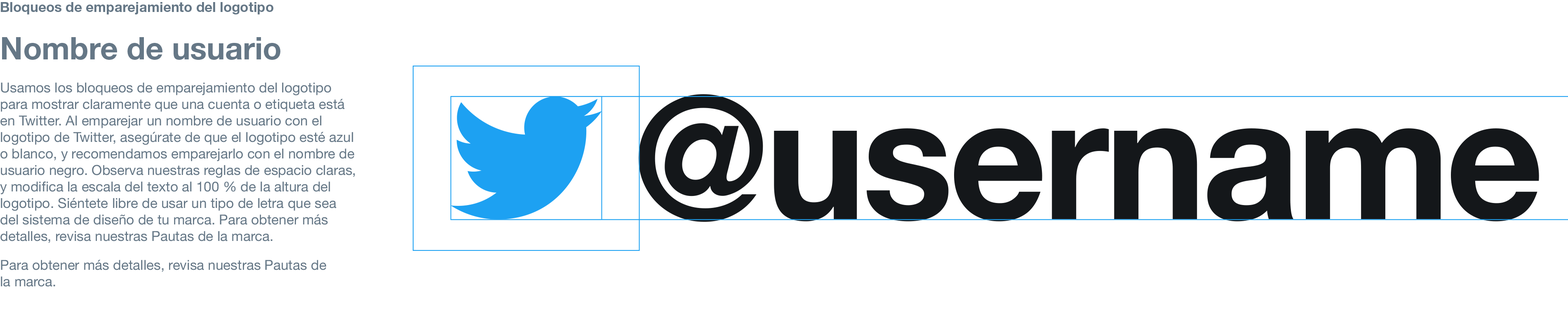
<style>
.page{position:relative;width:1568px;height:309px;background:#ffffff}
.page>*{position:absolute;margin:0}
.t1{font:13.7px "HelveticaNeue";color:#657786}
.t2{font:13.7px/30.9px "HelveticaNeue-Bold";color:#657786}
.t3{font:30.9px/30.9px "HelveticaNeue-Bold";color:#657786}
.t4{font:170.7px "HelveticaNeue-Bold";letter-spacing:-0.025em;color:#14171a}
</style>
<div class="page">
<p class="t1" style="left:0px;top:2px;width:355px;height:285px"><span class="t2">Bloqueos de emparejamiento del logotipo<br><br></span><span class="t3">Nombre de usuario<br><br></span>Usamos los bloqueos de emparejamiento del logotipo para mostrar claramente que una cuenta o etiqueta está en Twitter. Al emparejar un nombre de usuario con el logotipo de Twitter, asegúrate de que el logotipo esté azul o blanco, y recomendamos emparejarlo con el nombre de usuario negro. Observa nuestras reglas de espacio claras, y modifica la escala del texto al 100 % de la altura del logotipo. Siéntete libre de usar un tipo de letra que sea del sistema de diseño de tu marca. Para obtener más detalles, revisa nuestras Pautas de la marca.<br><br>Para obtener más detalles, revisa nuestras Pautas de <br>la marca.</p>
<p class="t4" style="left:638px;top:94px;width:901px;height:128px">@username</p>
</div>
